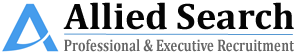
<style>
.page{position:relative;width:300px;height:54px;background:#ffffff}
.page>*{position:absolute;margin:0}
.t1{font:37.5px "Cambria-Bold";color:#050505}
.t2{font:16.7px "Cambria-Bold";color:#666666;scale:0.8 1}
</style>
<div class="page">
<p class="t1" style="left:63px;top:2px;width:231px;height:28px">Allied Search</p>
<p class="t2" style="left:64px;top:39px;width:230px;height:13px">Professional &amp; Executive Recruitment</p>
</div>
